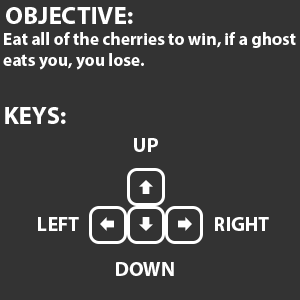
<style>
.page{position:relative;width:300px;height:300px;background:#333333}
.page>*{position:absolute;margin:0}
.t1{font:25px "MyriadPro-Bold";color:#ffffff}
.t2{font:17.5px "MyriadPro-Bold";color:#ffffff}
.t3{font:20px "MyriadPro-Bold";color:#ffffff}
</style>
<div class="page">
<p class="t1" style="left:6px;top:7px;width:127px;height:17px">OBJECTIVE:</p>
<p class="t2" style="left:3px;top:32px;width:293px;height:38px">Eat all of the cherries to win, if a ghost<br>eats you, you lose.</p>
<p class="t1" style="left:5px;top:107px;width:61px;height:17px">KEYS:</p>
<p class="t3" style="left:134px;top:138px;width:24px;height:14px">UP</p>
<p class="t3" style="left:38px;top:217px;width:41px;height:14px">LEFT</p>
<p class="t3" style="left:215px;top:217px;width:54px;height:14px">RIGHT</p>
<p class="t3" style="left:116px;top:262px;width:58px;height:14px">DOWN</p>
</div>
